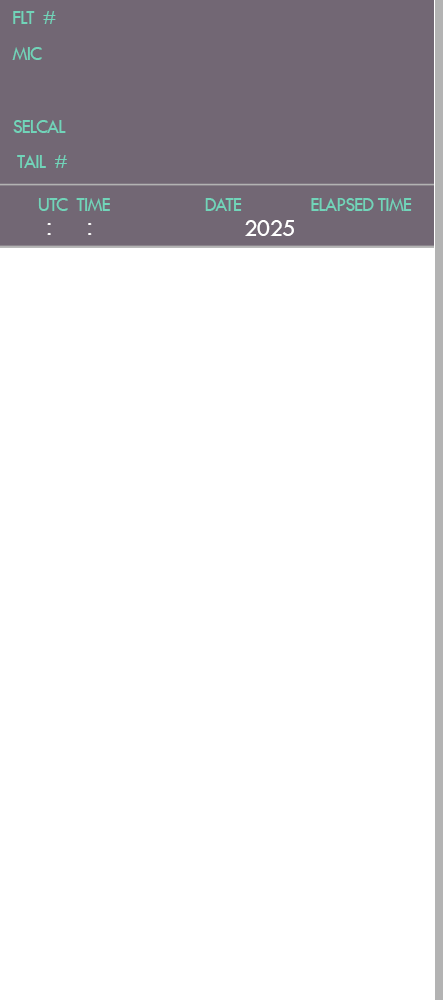
<style>
.page{position:relative;width:443px;height:1000px;background:#ffffff}
.page>*{position:absolute;margin:0}
.t1{font:20px "TwCenMT-Regular";letter-spacing:-0.05em;color:#71d4b9}
.t2{font:25px "TwCenMT-Regular";letter-spacing:-0.05em;color:#ffffff}
</style>
<div class="page">
<p class="t1" style="left:13px;top:11px;width:43px;height:13px">FLT  #</p>
<p class="t1" style="left:12px;top:47px;width:30px;height:13px">MIC</p>
<p class="t1" style="left:13px;top:120px;width:53px;height:13px">SELCAL</p>
<p class="t1" style="left:17px;top:155px;width:50px;height:13px">TAIL  #</p>
<p class="t1" style="left:38px;top:198px;width:72px;height:13px">UTC  TIME</p>
<p class="t1" style="left:205px;top:198px;width:37px;height:13px">DATE</p>
<p class="t1" style="left:311px;top:198px;width:101px;height:13px">ELAPSED TIME</p>
<p class="t2" style="left:245px;top:220px;width:49px;height:16px">2025</p>
</div>
